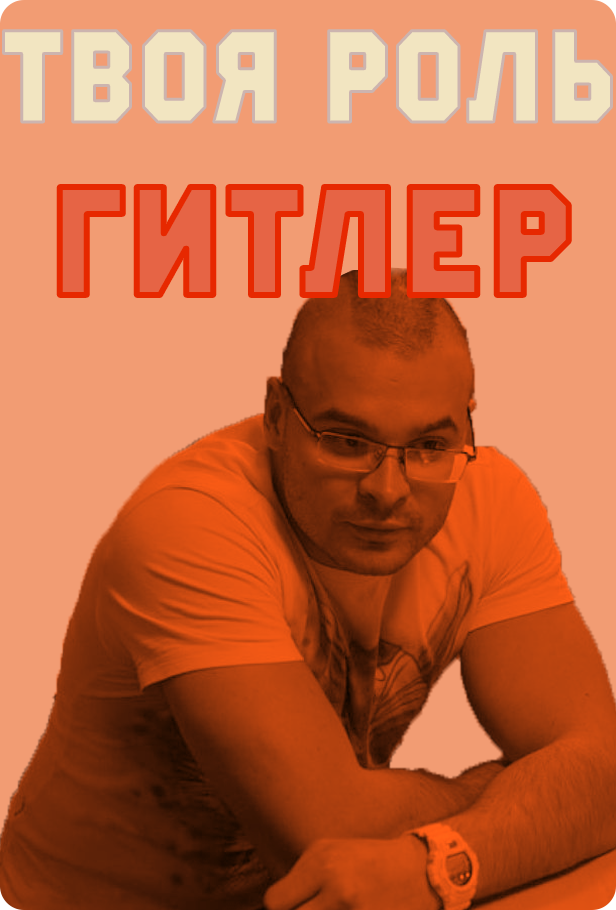
<style>
.page{position:relative;width:616px;height:910px;background:#f29c73}
.page>*{position:absolute;margin:0}
.t1{font:152.4px "MillionaireDEMO";color:#f2e5c1;scale:0.95 1}
.t2{font:180.1px "MillionaireDEMO";color:#e66445}
</style>
<div class="page">
<p class="t1" style="left:3px;top:30px;width:609px;height:92px">твоя роль</p>
<p class="t2" style="left:59px;top:187px;width:510px;height:108px">ГИТЛЕР</p>
</div>
